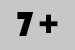
<style>
.page{position:relative;width:75px;height:50px;background:#c7c7c6}
.page>*{position:absolute;margin:0}
.t1{font:36px "STHupo";color:#000000}
</style>
<div class="page">
<p class="t1" style="left:17px;top:12px;width:41px;height:24px">7+</p>
</div>
